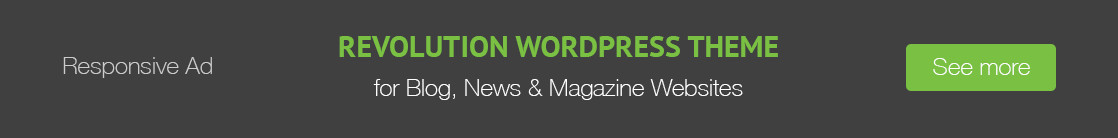
<style>
.page{position:relative;width:1118px;height:138px;background:#404040}
.page>*{position:absolute;margin:0}
.t1{font:30px "PTSans-Bold";color:#7ac143}
.t2{font:24px "HelveticaNeue-Thin";color:#cccccc}
.t3{font:24px "HelveticaNeue-Thin";color:#ffffff}
</style>
<div class="page">
<p class="t1" style="left:339px;top:36px;width:439px;height:21px">REVOLUTION WORDPRESS THEME</p>
<p class="t2" style="left:63px;top:57px;width:149px;height:21px">Responsive Ad</p>
<p class="t3" style="left:933px;top:58px;width:97px;height:17px">See more</p>
<p class="t3" style="left:373px;top:79px;width:370px;height:21px">for Blog, News &amp; Magazine Websites</p>
</div>
